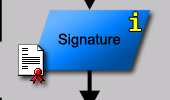
<style>
.page{position:relative;width:170px;height:100px;background:#c6c3c6}
.page>*{position:absolute;margin:0}
.t1{font:24px "Fixedsys";color:#ffff00}
.t2{font:14.7px "ArialMT";color:#000000}
</style>
<div class="page">
<p class="t1" style="left:129px;top:12px;width:12px;height:19px">i</p>
<p class="t2" style="left:58px;top:33px;width:63px;height:15px">Signature</p>
</div>
